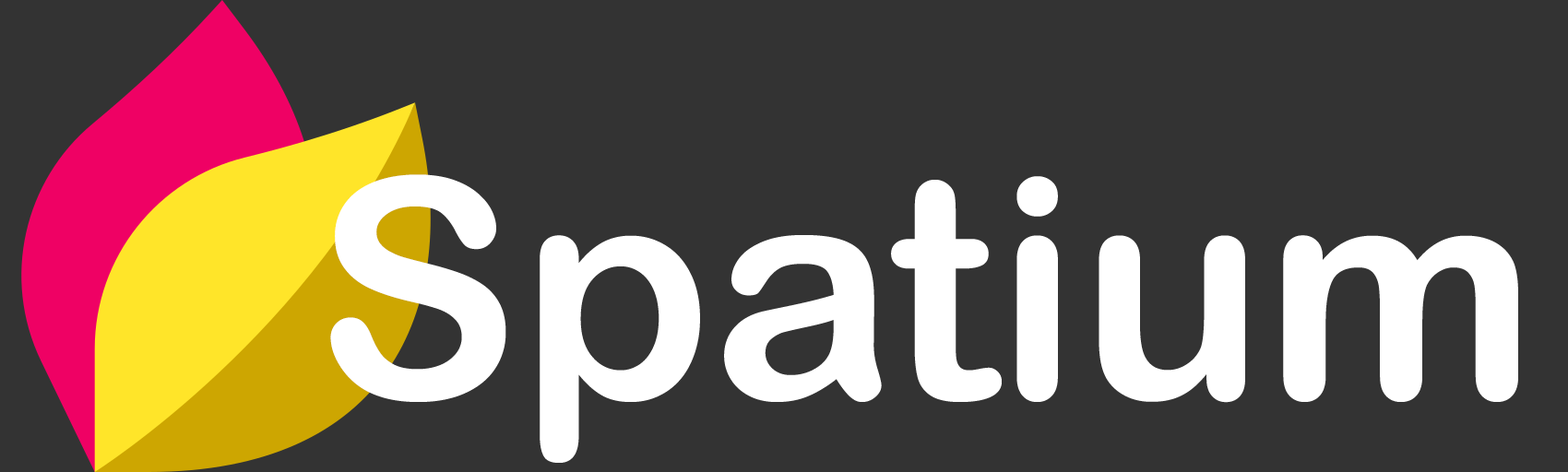
<style>
.page{position:relative;width:1568px;height:472px;background:#333333}
.page>*{position:absolute;margin:0}
.t1{font:307.5px "ArialRoundedMTBold";color:#ffffff}
</style>
<div class="page">
<p class="t1" style="left:330px;top:174px;width:1188px;height:289px">Spatium</p>
</div>
